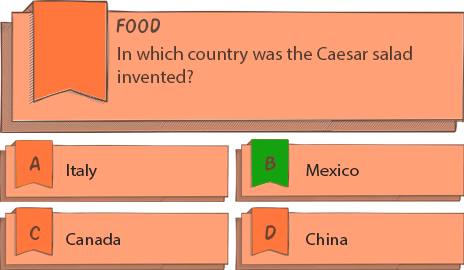
<style>
.page{position:relative;width:464px;height:270px;background:#ffa077}
.page>*{position:absolute;margin:0}
.t1{font:22.2px "ActionMan";color:#6b4332}
.t2{font:18.7px "MyriadPro-Regular";color:#4f3a32}
.t3{font:16.7px "MyriadPro-Regular";color:#262626;scale:1.07 1}
</style>
<div class="page">
<p class="t1" style="left:116px;top:18px;width:45px;height:15px">food</p>
<p class="t2" style="left:118px;top:46px;width:294px;height:37px">In which country was the Caesar salad invented?</p>
<p class="t1" style="left:29px;top:156px;width:12px;height:15px">A</p>
<p class="t1" style="left:265px;top:156px;width:11px;height:15px">B</p>
<p class="t3" style="left:67px;top:164px;width:30px;height:16px">Italy</p>
<p class="t3" style="left:306px;top:164px;width:53px;height:12px">Mexico</p>
<p class="t1" style="left:29px;top:226px;width:11px;height:14px">C</p>
<p class="t3" style="left:66px;top:233px;width:55px;height:12px">Canada</p>
<p class="t1" style="left:265px;top:225px;width:11px;height:15px">D</p>
<p class="t3" style="left:306px;top:233px;width:42px;height:12px">China</p>
</div>
